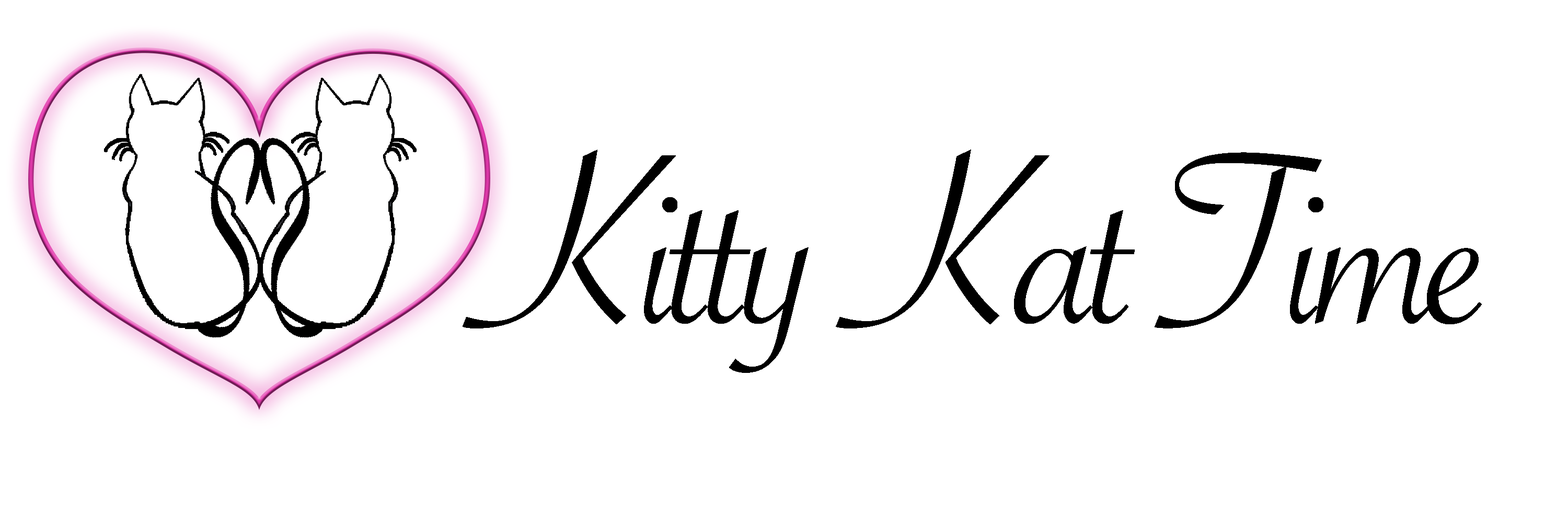
<style>
.page{position:relative;width:1568px;height:523px;background:#ffffff}
.page>*{position:absolute;margin:0}
.t1{font:261.3px "SavoyeLetPlain";letter-spacing:-0.04em;color:#000000}
</style>
<div class="page">
<p class="t1" style="left:463px;top:149px;width:1019px;height:224px">Kitty Kat Time</p>
</div>
